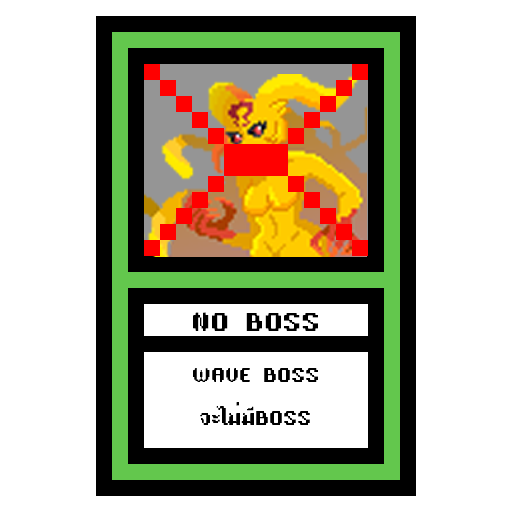
<style>
.page{position:relative;width:512px;height:512px;background:#ffffff}
.page>*{position:absolute;margin:0}
.t1{font:24px "TA16BIT-Regular";color:#000000}
.t2{font:18px "TA16BIT-Regular";color:#000000}
</style>
<div class="page">
<p class="t1" style="left:193px;top:312px;width:125px;height:19px">NO BOSS</p>
<p class="t2" style="left:193px;top:368px;width:125px;height:57px;text-align:center">WAVE BOSS<br><br>จะไม่มีBOSS</p>
</div>
